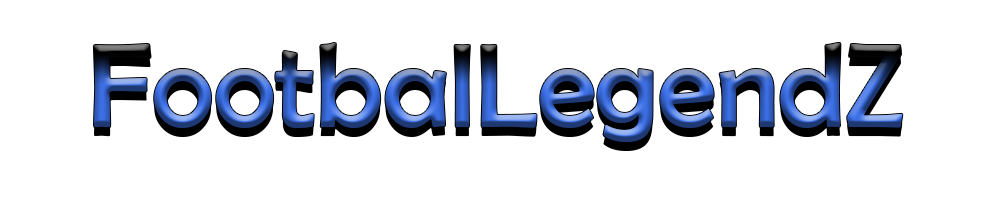
<style>
.page{position:relative;width:1000px;height:200px;background:#ffffff}
.page>*{position:absolute;margin:0}
.t1{font:120px "BerlinSansFB-Reg"}
</style>
<div class="page">
<p class="t1" style="left:93px;top:43px;width:810px;height:99px">FootbalLegendZ</p>
</div>
